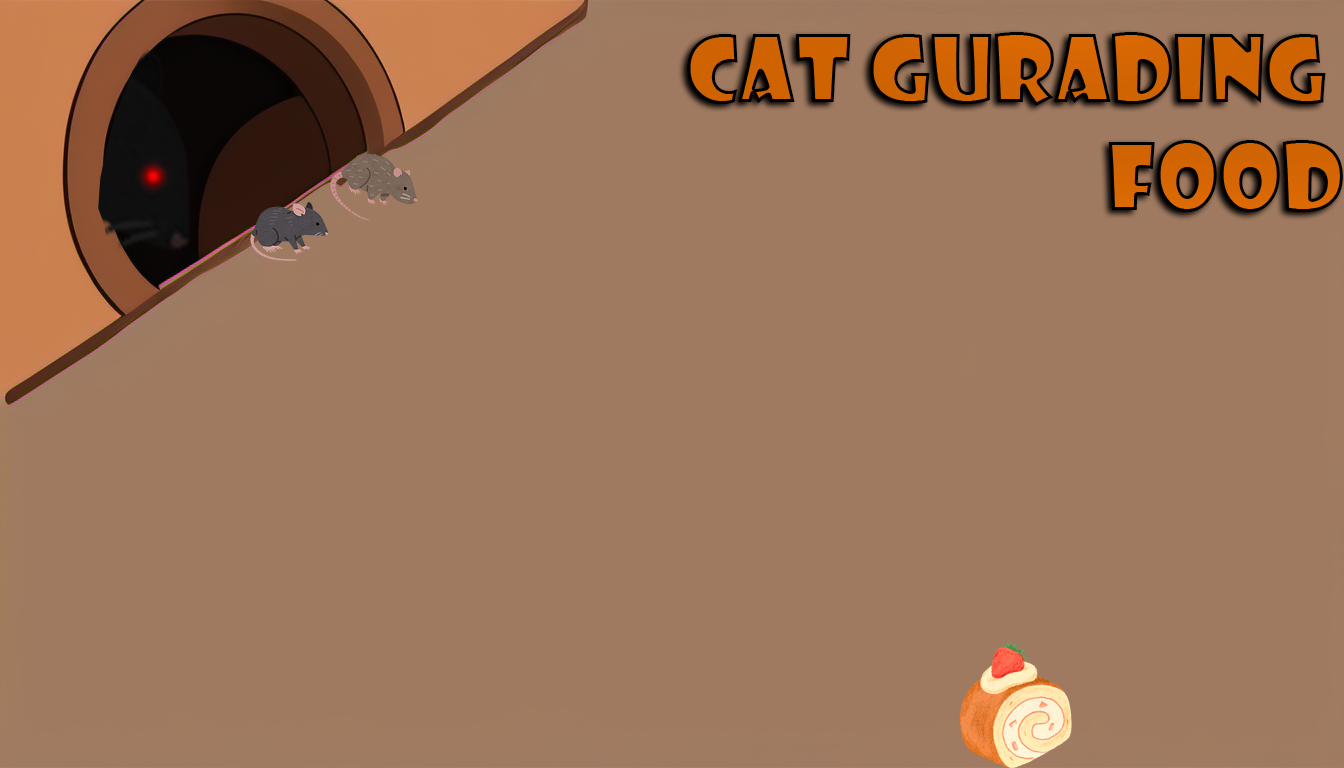
<style>
.page{position:relative;width:1344px;height:768px;background:#a07a60}
.page>*{position:absolute;margin:0}
.t1{font:90px "ShowcardGothic-Reg";color:#cf6302}
</style>
<div class="page">
<p class="t1" style="left:687px;top:32px;width:656px;height:180px;text-align:right">Cat Gurading <br>Food</p>
</div>
